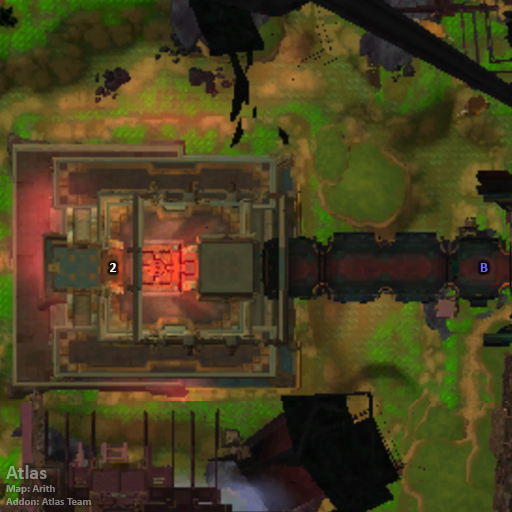
<style>
.page{position:relative;width:512px;height:512px}
.page>*{position:absolute;margin:0}
.t1{font:14px "Calibri-Bold";color:#ffffff}
.t2{font:14px "Calibri-Bold";color:#6666ff}
.t3{font:11px "Calibri-Bold"}
.t4{font:20px "Calibri-Bold"}
</style>
<div class="page">
<p class="t1" style="left:110px;top:263px;width:7px;height:9px">2</p>
<p class="t2" style="left:480px;top:263px;width:8px;height:9px">B</p>
<p class="t3" style="left:6px;top:465px;width:85px;height:40px"><span class="t4">Atlas<br></span>Map: Arith<br>Addon: Atlas Team</p>
</div>
